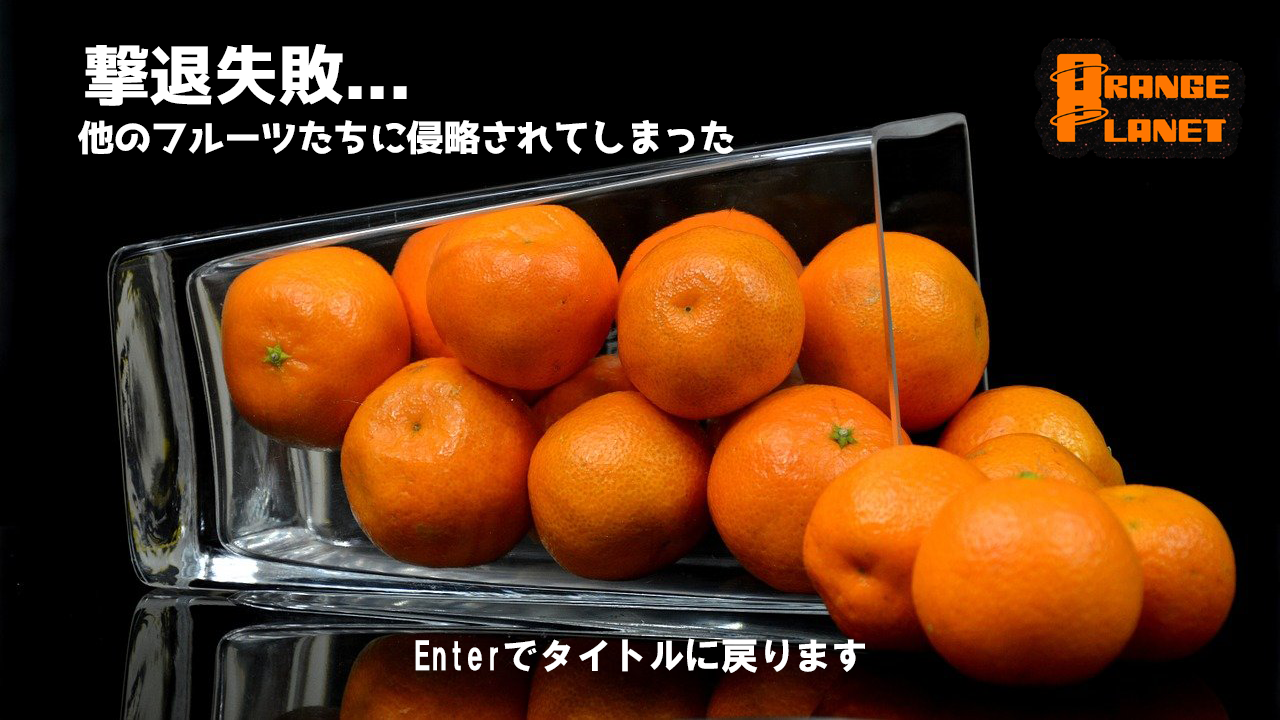
<style>
.page{position:relative;width:1280px;height:720px;background:#000000}
.page>*{position:absolute;margin:0}
.t1{font:66.7px "07LightNovelPOP";letter-spacing:-0.025em;color:#ffffff}
.t2{font:37.5px "07LightNovelPOP";letter-spacing:-0.025em;color:#ffffff}
.t3{font:37.5px "HGSoeiKakugothicUB";letter-spacing:-0.025em;color:#ffffff}
</style>
<div class="page">
<p class="t1" style="left:85px;top:44px;width:322px;height:62px">撃退失敗...</p>
<p class="t2" style="left:78px;top:120px;width:656px;height:35px">他のフルーツたちに侵略されてしまった</p>
<p class="t3" style="left:415px;top:638px;width:450px;height:35px">Enterでタイトルに戻ります</p>
</div>
